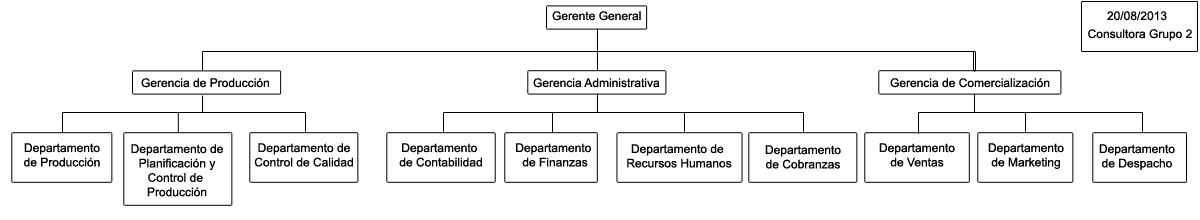
<style>
.page{position:relative;width:1200px;height:220px;background:#ffffff}
.page>*{position:absolute;margin:0}
.t1{font:12px "ArialMT";color:#000000}
</style>
<div class="page">
<p class="t1" style="left:552px;top:11px;width:89px;height:10px">Gerente General</p>
<p class="t1" style="left:1107px;top:11px;width:60px;height:10px">20/08/2013</p>
<p class="t1" style="left:1088px;top:29px;width:104px;height:12px">Consultora Grupo 2</p>
<p class="t1" style="left:141px;top:78px;width:128px;height:10px">Gerencia de Producción</p>
<p class="t1" style="left:533px;top:78px;width:127px;height:10px">Gerencia Administrativa</p>
<p class="t1" style="left:890px;top:78px;width:160px;height:10px">Gerencia de Comercialización</p>
<p class="t1" style="left:24px;top:143px;width:76px;height:24px;text-align:center">Departamento<br>de Producción</p>
<p class="t1" style="left:131px;top:144px;width:92px;height:53px;text-align:center">Departamento de<br>Planificación y<br>Control de <br>Producción</p>
<p class="t1" style="left:254px;top:143px;width:99px;height:24px;text-align:center">Departamento de<br>Control de Calidad</p>
<p class="t1" style="left:399px;top:143px;width:83px;height:24px;text-align:center">Departamento <br>de Contabilidad</p>
<p class="t1" style="left:516px;top:143px;width:75px;height:24px;text-align:center">Departamento <br>de Finanzas</p>
<p class="t1" style="left:627px;top:144px;width:105px;height:24px;text-align:center">Departamento de <br>Recursos Humanos</p>
<p class="t1" style="left:765px;top:145px;width:76px;height:24px;text-align:center">Departamento<br>de Cobranzas</p>
<p class="t1" style="left:879px;top:143px;width:76px;height:24px;text-align:center">Departamento<br>de Ventas</p>
<p class="t1" style="left:988px;top:143px;width:76px;height:26px;text-align:center">Departamento<br>de Marketing</p>
<p class="t1" style="left:1099px;top:144px;width:76px;height:26px;text-align:center">Departamento<br>de Despacho</p>
</div>
